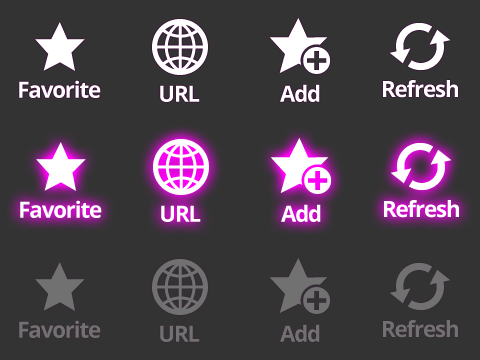
<style>
.page{position:relative;width:480px;height:360px;background:#333333}
.page>*{position:absolute;margin:0}
.t1{font:22.2px "OpenSans-Bold";letter-spacing:-0.05em;color:#ffffff}
.t2{font:22.2px "OpenSans-Bold";letter-spacing:-0.05em;color:#717171}
</style>
<div class="page">
<p class="t1" style="left:19px;top:80px;width:82px;height:18px">Favorite</p>
<p class="t1" style="left:160px;top:85px;width:40px;height:17px">URL</p>
<p class="t1" style="left:280px;top:84px;width:40px;height:18px">Add</p>
<p class="t1" style="left:383px;top:80px;width:75px;height:18px">Refresh</p>
<p class="t1" style="left:20px;top:200px;width:82px;height:18px">Favorite</p>
<p class="t1" style="left:161px;top:205px;width:40px;height:17px">URL</p>
<p class="t1" style="left:281px;top:204px;width:40px;height:18px">Add</p>
<p class="t1" style="left:384px;top:200px;width:75px;height:18px">Refresh</p>
<p class="t2" style="left:19px;top:320px;width:82px;height:18px">Favorite</p>
<p class="t2" style="left:160px;top:325px;width:40px;height:17px">URL</p>
<p class="t2" style="left:280px;top:324px;width:40px;height:18px">Add</p>
<p class="t2" style="left:383px;top:320px;width:75px;height:18px">Refresh</p>
</div>
